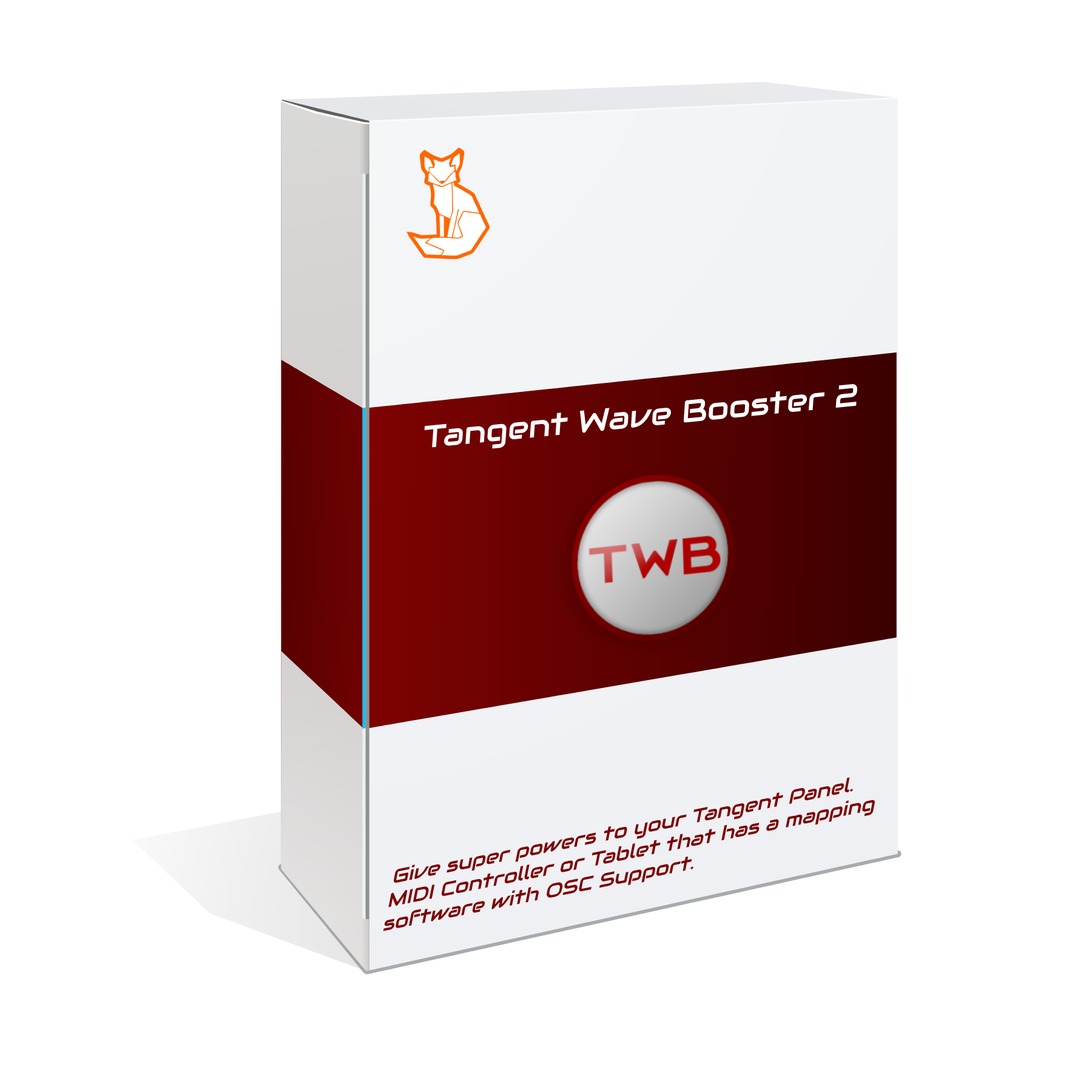
<style>
.page{position:relative;width:1092px;height:1092px;background:#ffffff}
.page>*{position:absolute;margin:0}
.t1{font:31.7px "Audiowide-Regular";color:#ffffff}
.t2{font:20.2px "Audiowide-Regular";color:#7c0202}
</style>
<div class="page">
<p class="t1" style="left:424px;top:384px;width:433px;height:65px;rotate:-6deg">Tangent Wave Booster 2</p>
<p class="t2" style="left:383px;top:777px;width:492px;height:154px;rotate:-11deg">Give super powers to your Tangent Panel.<br>MIDI Controller or Tablet that has a mapping<br>software with OSC Support.</p>
</div>
